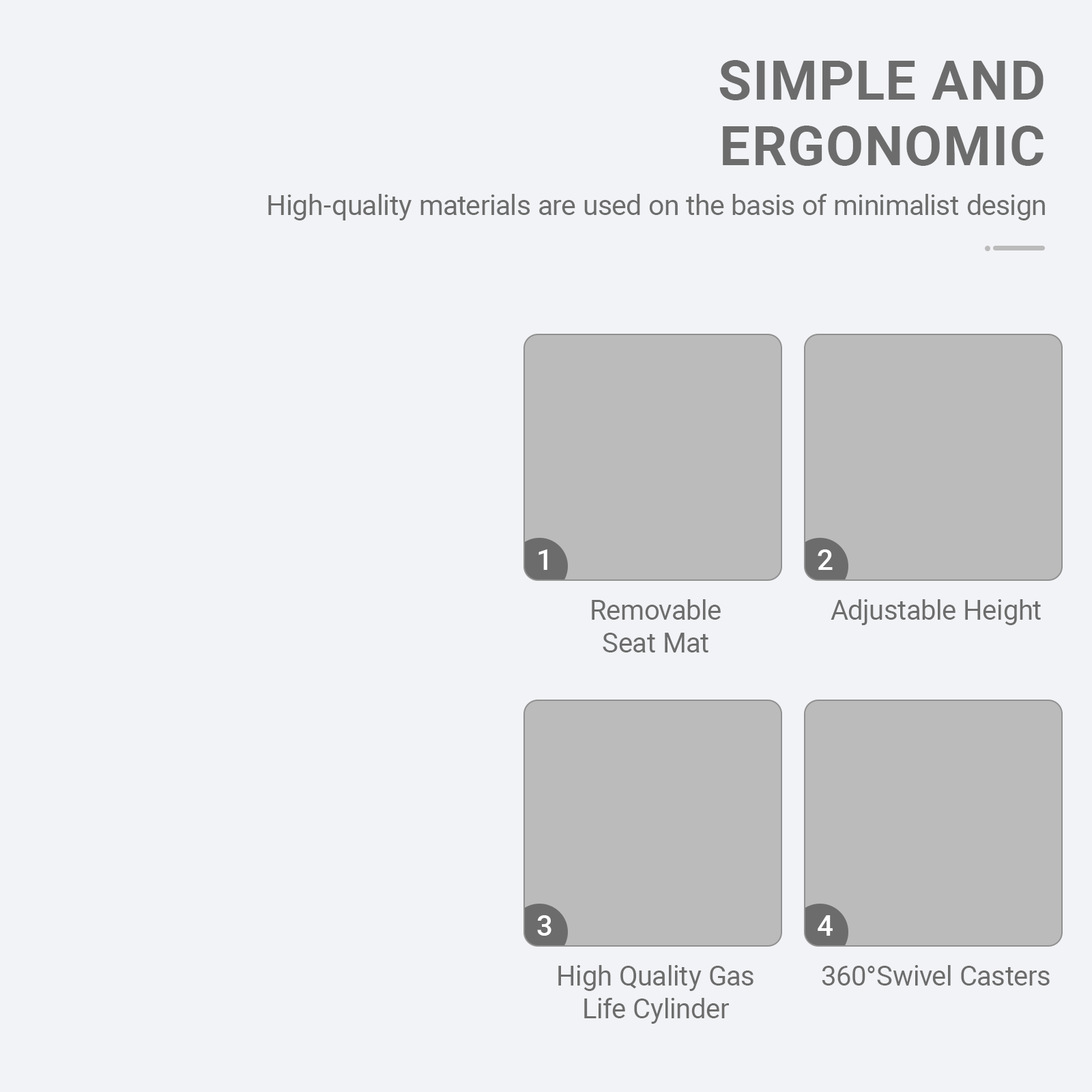
<style>
.page{position:relative;width:1092px;height:1092px;background:#f2f3f6}
.page>*{position:absolute;margin:0}
.t1{font:54.6px "Roboto-Bold";color:#6c6c6c;text-transform:uppercase}
.t2{font:27.7px "Roboto-Regular";color:#6c6c6c}
.t3{font:28.7px "Roboto-Medium";color:#ffffff}
.t4{font:27.3px "Roboto-Regular";color:#6c6c6c}
</style>
<div class="page">
<p class="t1" style="left:719px;top:60px;width:325px;height:106px;text-align:right">Simple and<br>Ergonomic</p>
<p class="t2" style="left:268px;top:194px;width:777px;height:26px">High-quality materials are used on the basis of minimalist design</p>
<p class="t3" style="left:538px;top:549px;width:9px;height:21px">1</p>
<p class="t3" style="left:818px;top:549px;width:15px;height:21px">2</p>
<p class="t4" style="left:592px;top:599px;width:129px;height:53px;text-align:center">Removable<br>Seat Mat</p>
<p class="t4" style="left:831px;top:599px;width:210px;height:26px">Adjustable Height</p>
<p class="t3" style="left:537px;top:915px;width:14px;height:21px">3</p>
<p class="t3" style="left:818px;top:915px;width:15px;height:21px">4</p>
<p class="t4" style="left:558px;top:965px;width:195px;height:59px;text-align:center">High Quality Gas<br>Life Cylinder</p>
<p class="t4" style="left:822px;top:965px;width:228px;height:21px">360°Swivel Casters</p>
</div>
